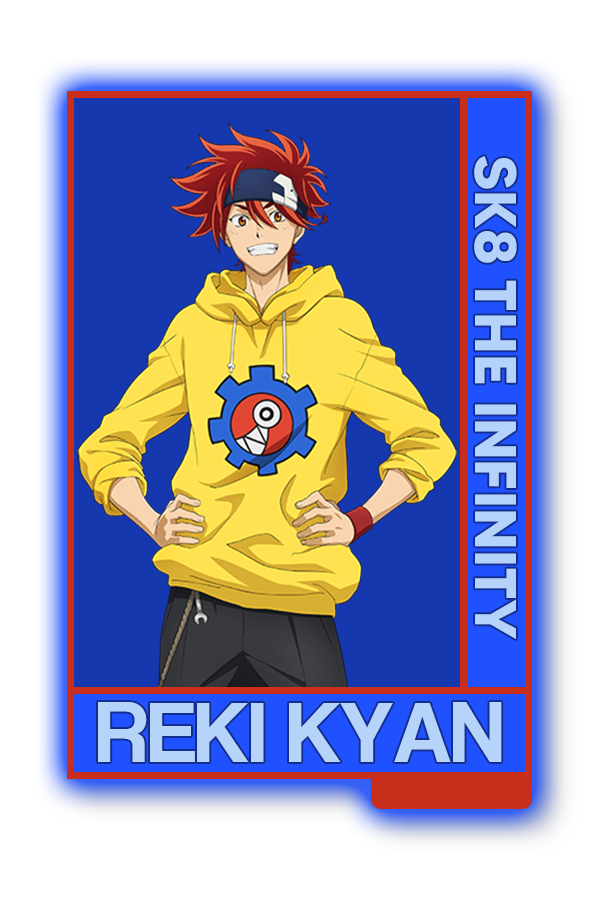
<style>
.page{position:relative;width:600px;height:900px;background:#ffffff}
.page>*{position:absolute;margin:0}
.t1{font:58.4px "MADETOMMY-Bold";color:#b5d3fa}
.t2{font:88.9px "CoolveticaRg-Regular";color:#b6d4fa}
</style>
<div class="page">
<p class="t1" style="left:474px;top:156px;width:43px;height:483px;rotate:90deg">SK8 THE INFINITY</p>
<p class="t2" style="left:98px;top:702px;width:404px;height:60px">REKI KYAN</p>
</div>
